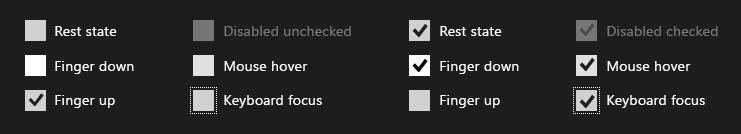
<style>
.page{position:relative;width:741px;height:134px;background:#1d1d1d}
.page>*{position:absolute;margin:0}
.t1{font:14px "SegoeUI";letter-spacing:0.02em;color:#ffffff}
.t2{font:14px "SegoeUI";letter-spacing:0.02em;color:#767676}
</style>
<div class="page">
<p class="t1" style="left:55px;top:26px;width:62px;height:10px">Rest state</p>
<p class="t2" style="left:224px;top:26px;width:127px;height:10px">Disabled unchecked</p>
<p class="t1" style="left:440px;top:26px;width:62px;height:10px">Rest state</p>
<p class="t2" style="left:607px;top:26px;width:111px;height:10px">Disabled checked</p>
<p class="t1" style="left:55px;top:61px;width:79px;height:13px">Finger down</p>
<p class="t1" style="left:224px;top:61px;width:84px;height:10px">Mouse hover</p>
<p class="t1" style="left:440px;top:61px;width:79px;height:13px">Finger down</p>
<p class="t1" style="left:607px;top:61px;width:84px;height:10px">Mouse hover</p>
<p class="t1" style="left:55px;top:95px;width:60px;height:13px">Finger up</p>
<p class="t1" style="left:224px;top:95px;width:98px;height:13px">Keyboard focus</p>
<p class="t1" style="left:440px;top:95px;width:60px;height:13px">Finger up</p>
<p class="t1" style="left:607px;top:95px;width:98px;height:13px">Keyboard focus</p>
</div>
